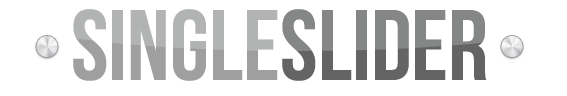
<style>
.page{position:relative;width:567px;height:96px;background:#ffffff}
.page>*{position:absolute;margin:0}
.t1{font:100.2px "BebasNeue"}
.t2{font:100.2px "BebasNeue";color:#9f9f9f}
.t3{font:100.2px "BebasNeue";color:#646464}
</style>
<div class="page">
<p class="t1" style="left:73px;top:10px;width:414px;height:72px">SINGLESLIDER</p>
<p class="t2" style="left:73px;top:9px;width:414px;height:72px">SINGLE<span class="t3">SLIDER</span></p>
</div>
